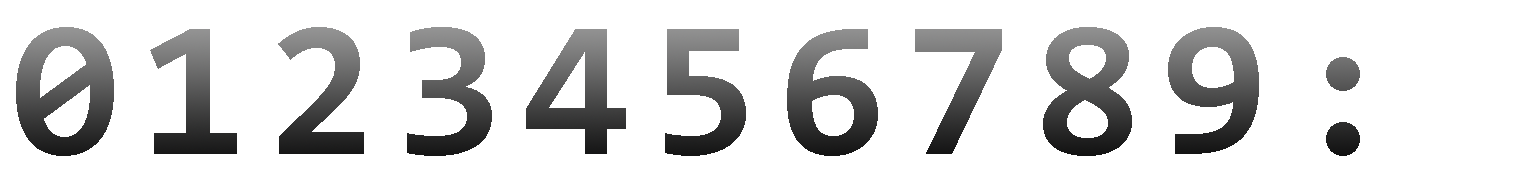
<style>
.page{position:relative;width:1536px;height:180px;background:#ffffff}
.page>*{position:absolute;margin:0}
.t1{font:196px "Consolas-Bold";letter-spacing:0.102em}
</style>
<div class="page">
<p class="t1" style="left:16px;top:27px;width:1344px;height:129px">0123456789:</p>
</div>
